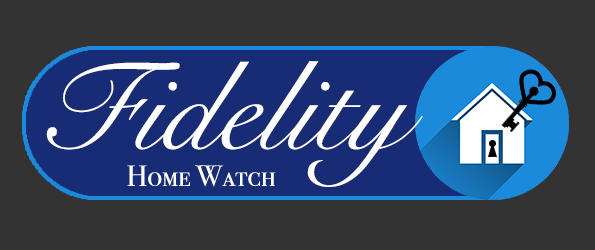
<style>
.page{position:relative;width:595px;height:250px;background:#333333}
.page>*{position:absolute;margin:0}
.t1{font:125px "SnellRoundhand";color:#ffffff}
</style>
<div class="page">
<p class="t1" style="left:46px;top:61px;width:377px;height:126px">Fidelity</p>
</div>
